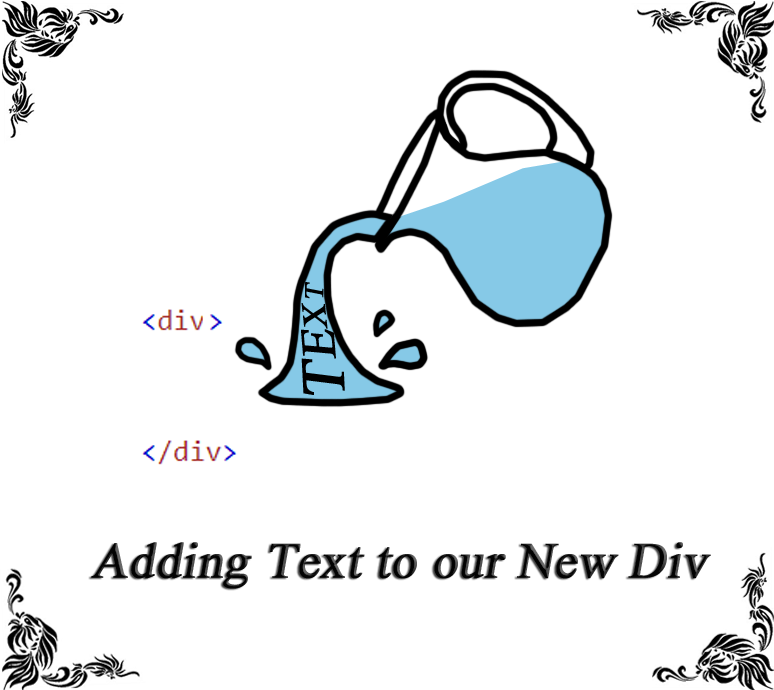
<style>
.page{position:relative;width:774px;height:690px;background:#ffffff}
.page>*{position:absolute;margin:0}
.t1{font:27px "TimesNewRomanPSMT";color:#000000;font-weight:bold;font-style:italic}
.t2{font:34px "TimesNewRomanPSMT";color:#000000;font-weight:bold;font-style:italic}
.t3{font:48px "TimesNewRomanPSMT";color:#000000;font-weight:bold;font-style:italic}
.t4{font:61px "TimesNewRomanPSMT";color:#000000;font-weight:bold;font-style:italic}
.t5{font:50px "TimesNewRomanPSMT";color:#040404;font-weight:bold;font-style:italic}
</style>
<div class="page">
<p class="t1" style="left:305px;top:282px;width:19px;height:17px;rotate:-89deg">T</p>
<p class="t2" style="left:301px;top:303px;width:27px;height:26px;rotate:-96deg">X</p>
<p class="t3" style="left:301px;top:329px;width:35px;height:30px;rotate:-95deg">E</p>
<p class="t4" style="left:301px;top:358px;width:44px;height:37px;rotate:-93deg">T</p>
<p class="t5" style="left:91px;top:542px;width:620px;height:47px">Adding Text to our New Div</p>
</div>
